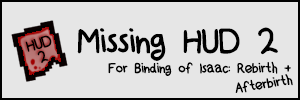
<style>
.page{position:relative;width:300px;height:100px;background:#e6e6e6}
.page>*{position:absolute;margin:0}
.t1{font:40px "KidSans";color:#000000;font-weight:bold}
.t2{font:18px "KidSans";color:#000000;font-weight:bold}
.t3{font:16px "KidSans";color:#000000;font-weight:bold}
</style>
<div class="page">
<p class="t1" style="left:77px;top:27px;width:201px;height:34px">Missing HUD 2</p>
<p class="t2" style="left:25px;top:35px;width:27px;height:17px;rotate:-15deg">HUD</p>
<p class="t2" style="left:37px;top:51px;width:12px;height:12px;rotate:-15deg">2</p>
<p class="t3" style="left:108px;top:61px;width:183px;height:15px">For Binding of Isaac: Rebirth +</p>
<p class="t3" style="left:235px;top:74px;width:58px;height:19px;rotate:-9deg">Afterbirth</p>
</div>
